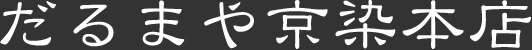
<style>
.page{position:relative;width:532px;height:50px;background:#333333}
.page>*{position:absolute;margin:0}
.t1{font:68px "DFLeiSho-SB-MP-RKSJ-H";color:#ffffff}
</style>
<div class="page">
<p class="t1" style="left:0px;top:0px;width:531px;height:49px">だるまや京染本店</p>
</div>
